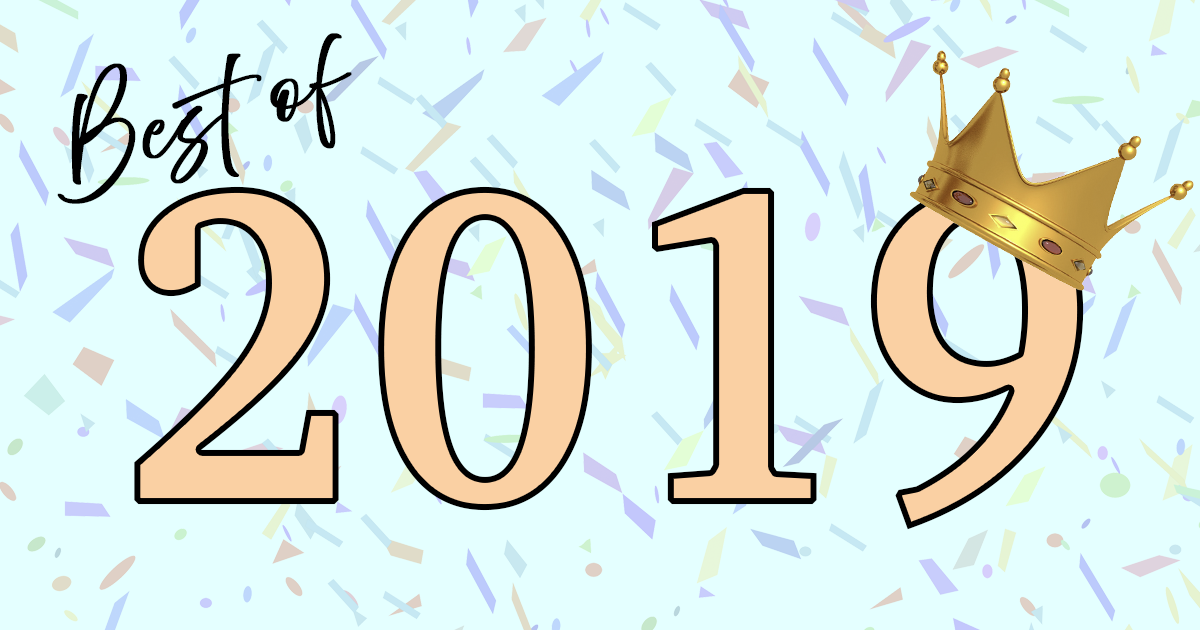
<style>
.page{position:relative;width:1200px;height:630px;background:#e4ffff}
.page>*{position:absolute;margin:0}
.t1{font:73.6px "AbovetheBeyondScript-Regular";color:#000000;font-weight:bold;scale:1.11 1}
.t2{font:451.8px "Charter-Bold";color:#fad0a3;font-weight:bold;scale:0.9 1}
</style>
<div class="page">
<p class="t1" style="left:57px;top:33px;width:295px;height:171px;rotate:-15deg">Best of</p>
<p class="t2" style="left:134px;top:186px;width:950px;height:344px">2019</p>
</div>
